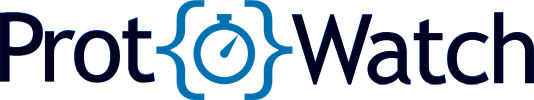
<style>
.page{position:relative;width:534px;height:100px;background:#ffffff}
.page>*{position:absolute;margin:0}
.t1{font:95.7px "TrebuchetMS";letter-spacing:-0.04em;color:#000222}
</style>
<div class="page">
<p class="t1" style="left:0px;top:12px;width:155px;height:70px">Prot</p>
<p class="t1" style="left:291px;top:12px;width:244px;height:72px">Watch</p>
</div>
